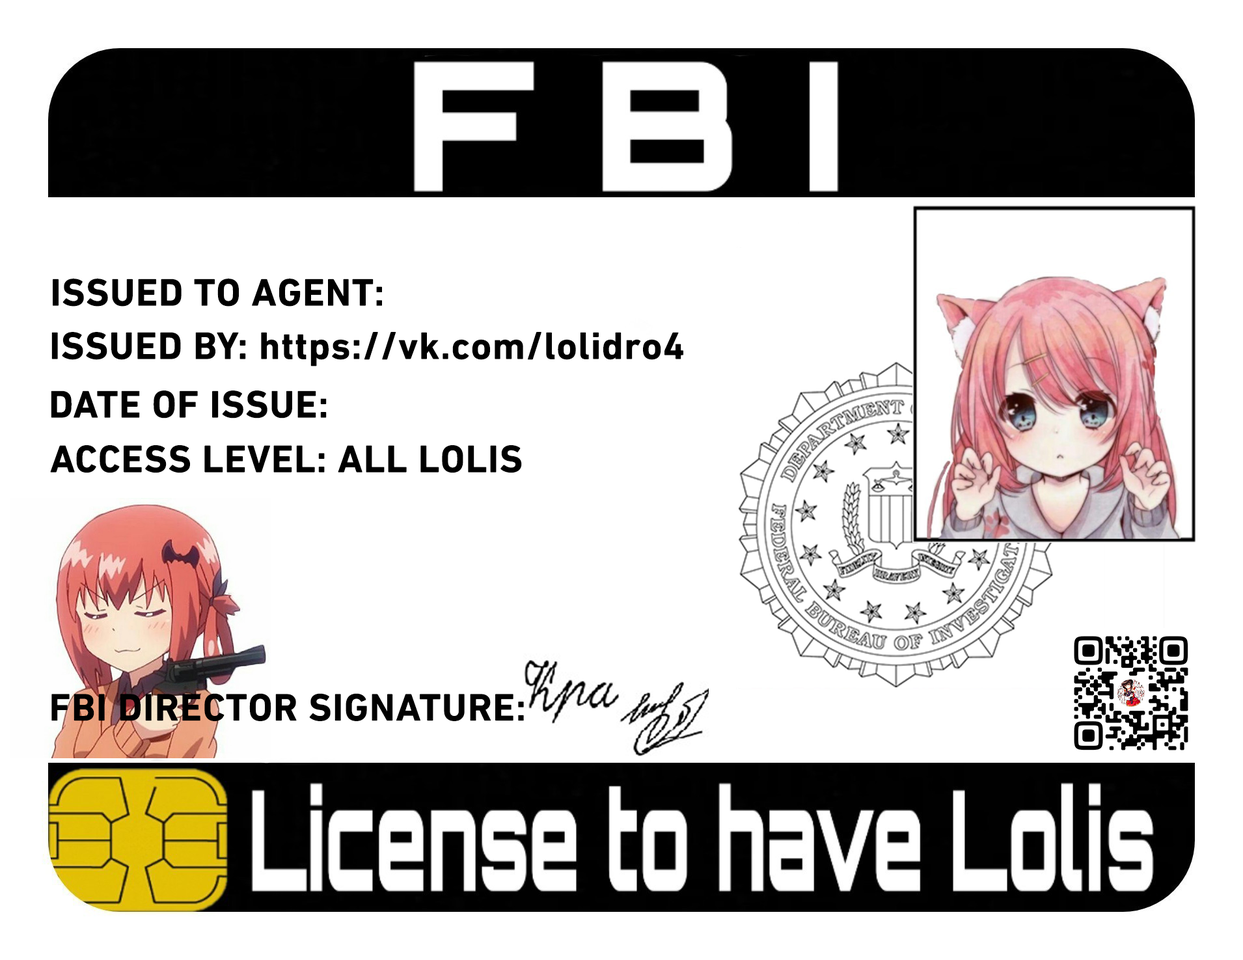
<style>
.page{position:relative;width:1243px;height:960px;background:#ffffff}
.page>*{position:absolute;margin:0}
.t1{font:39px "DINNextCYR-Bold";letter-spacing:0.02em;color:#000000}
.t2{font:39px "DINNextCYR-Bold";letter-spacing:0.02em;color:#010101}
</style>
<div class="page">
<p class="t1" style="left:53px;top:278px;width:329px;height:28px">ISSUED TO AGENT:</p>
<p class="t1" style="left:51px;top:332px;width:632px;height:34px">ISSUED BY: https://vk.com/lolidro4</p>
<p class="t2" style="left:51px;top:390px;width:276px;height:28px">DATE OF ISSUE:</p>
<p class="t1" style="left:50px;top:445px;width:472px;height:28px">ACCESS LEVEL: ALL LOLIS</p>
<p class="t2" style="left:51px;top:693px;width:473px;height:28px">FBI DIRECTOR SIGNATURE:</p>
</div>
